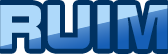
<style>
.page{position:relative;width:168px;height:54px;background:#003262}
.page>*{position:absolute;margin:0}
.t1{font:69.3px "DFSoGeiStd-W9";scale:0.92 1}
</style>
<div class="page">
<p class="t1" style="left:0px;top:5px;width:168px;height:44px">RUIM</p>
</div>
